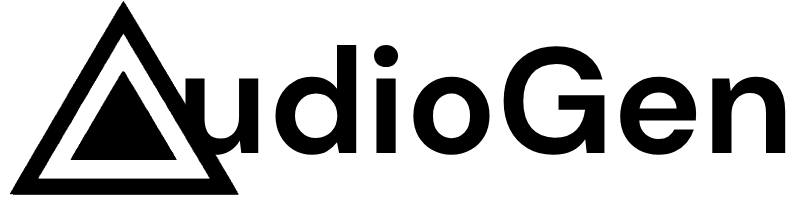
<style>
.page{position:relative;width:797px;height:201px;background:#ffffff}
.page>*{position:absolute;margin:0}
.t1{font:150px "DMSans-Bold";color:#000000}
</style>
<div class="page">
<p class="t1" style="left:185px;top:45px;width:601px;height:110px">udioGen</p>
</div>
